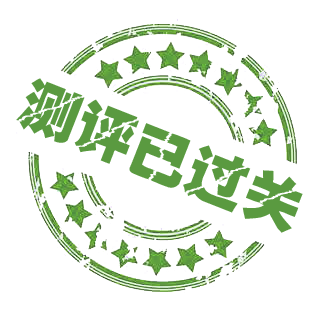
<style>
.page{position:relative;width:322px;height:310px;background:#ffffff}
.page>*{position:absolute;margin:0}
.t1{font:60px "PiliEG-Ultra-GB";color:#5a9a40}
</style>
<div class="page">
<p class="t1" style="left:16px;top:78px;width:287px;height:155px;rotate:22deg">测评已过关</p>
</div>
